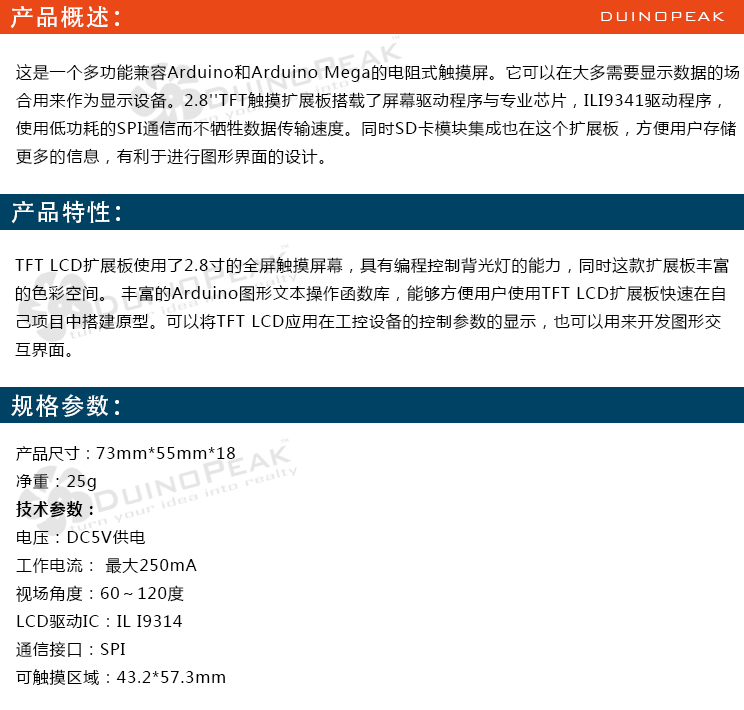
<style>
.page{position:relative;width:744px;height:710px;background:#ffffff}
.page>*{position:absolute;margin:0}
.t1{font:24px "AdobeHeitiStd-Regular";letter-spacing:0.05em;color:#ffffff}
.t2{font:18px "BankGothicBT-Light";letter-spacing:0.05em;color:#ffffff}
.t3{font:16px "MicrosoftYaHei";letter-spacing:0.05em;color:#000000}
.t4{font:16px "MicrosoftYaHei";color:#000000}
.t5{font:16px "MicrosoftYaHei-Bold";letter-spacing:0.05em;color:#000000}
</style>
<div class="page">
<p class="t1" style="left:10px;top:6px;width:109px;height:23px">产品概述：</p>
<p class="t2" style="left:601px;top:12px;width:124px;height:9px">DUINOPEAK</p>
<p class="t3" style="left:16px;top:64px;width:724px;height:101px">这是一个多功能兼容Arduino和Arduino Mega的电阻式触摸屏。它可以在大多需要显示数据的场<br>合用来作为显示设备。2.8''TFT触摸扩展板搭载了屏幕驱动程序与专业芯片，ILI9341驱动程序，<br>使用低功耗的SPI通信而不牺牲数据传输速度。同时SD卡模块集成也在这个扩展板，方便用户存储<br>更多的信息，有利于进行图形界面的设计。</p>
<p class="t1" style="left:11px;top:200px;width:109px;height:24px">产品特性：</p>
<p class="t3" style="left:15px;top:257px;width:714px;height:100px">TFT LCD扩展板使用了2.8寸的全屏触摸屏幕，具有编程控制背光灯的能力，同时这款扩展板丰富<br>的色彩空间。 丰富的Arduino图形文本操作函数库，能够方便用户使用TFT LCD扩展板快速在自<br>己项目中搭建原型。可以将TFT LCD应用在工控设备的控制参数的显示，也可以用来开发图形交<br>互界面。</p>
<p class="t1" style="left:11px;top:394px;width:108px;height:23px">规格参数：</p>
<p class="t3" style="left:16px;top:446px;width:219px;height:239px"><span class="t4">产品尺寸：</span>73mm*55mm*18<br>净重：25g<br><span class="t5">技术参数：<br></span>电压：DC5V供电<br>工作电流： 最大250mA<br>视场角度：60～120度<br>LCD驱动IC：IL I9314<br>通信接口：SPI<br>可触摸区域：43.2*57.3mm</p>
</div>
